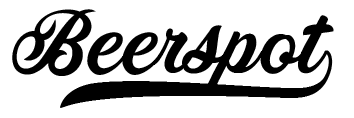
<style>
.page{position:relative;width:354px;height:118px;background:#ffffff}
.page>*{position:absolute;margin:0}
.t1{font:85.4px "PainterPERSONALUSEONLY";color:#000000}
</style>
<div class="page">
<p class="t1" style="left:12px;top:9px;width:322px;height:99px">Beerspot&gt;</p>
</div>
